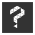
<style>
.page{position:relative;width:35px;height:35px;background:#333333}
.page>*{position:absolute;margin:0}
.t1{font:30px "Merkur";color:#ffffff}
</style>
<div class="page">
<p class="t1" style="left:10px;top:6px;width:15px;height:22px">?</p>
</div>
